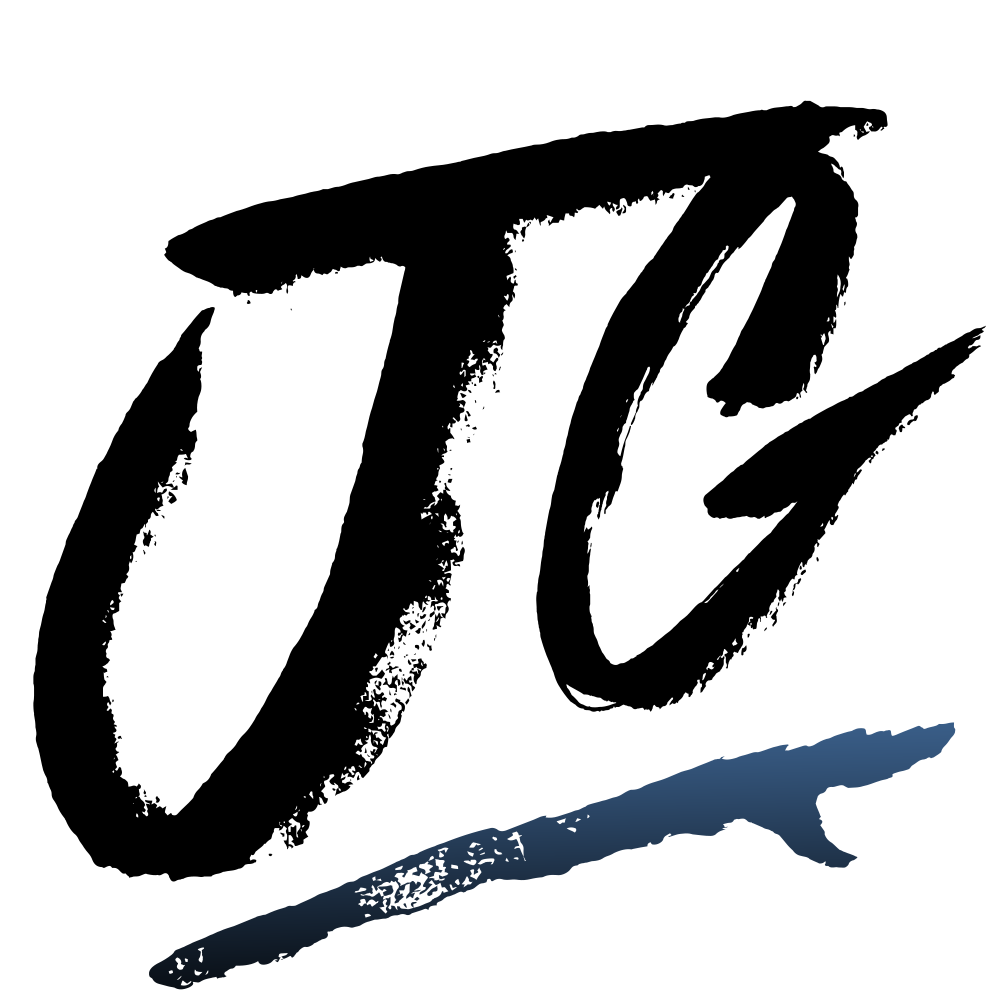
<style>
.page{position:relative;width:1000px;height:1000px;background:#ffffff}
.page>*{position:absolute;margin:0}
.t1{font:781.3px "Againts";color:#000000;scale:0.9 1}
.t2{font:466.2px "thunder";scale:1.57 1}
</style>
<div class="page">
<p class="t1" style="left:33px;top:100px;width:953px;height:782px">JG</p>
<p class="t2" style="left:149px;top:722px;width:807px;height:268px;rotate:-18deg">d</p>
</div>
